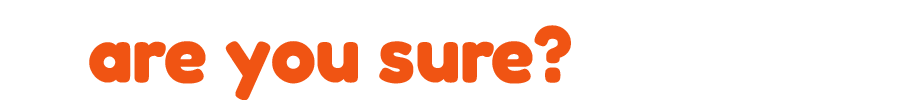
<style>
.page{position:relative;width:900px;height:100px;background:#ffffff}
.page>*{position:absolute;margin:0}
.t1{font:80px "Fredoka-Bold";letter-spacing:-0.005em;color:#f05413}
</style>
<div class="page">
<p class="t1" style="left:89px;top:25px;width:482px;height:76px">are you sure?</p>
</div>
